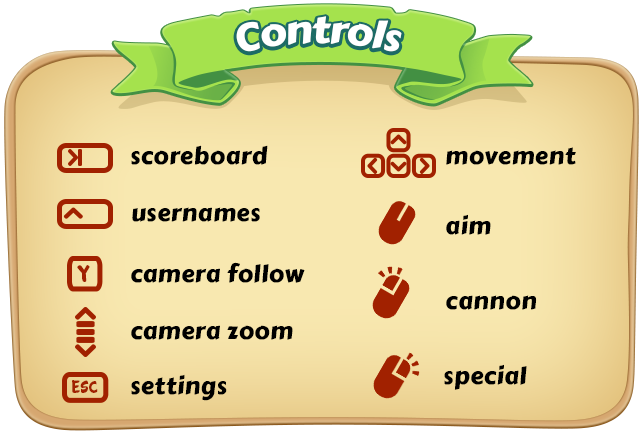
<style>
.page{position:relative;width:643px;height:434px}
.page>*{position:absolute;margin:0}
.t1{font:38px "CarterOne";letter-spacing:-0.02em;color:#ffffff}
.t2{font:24px "CarterOne";letter-spacing:0.02em;color:#000000}
.t3{font:25px "Cartwheel";letter-spacing:0.02em;color:#a12100}
.t4{font:17.9px "Cartwheel";letter-spacing:0.02em;color:#a12100}
</style>
<div class="page">
<p class="t1" style="left:236px;top:16px;width:166px;height:36px">Controls</p>
<p class="t2" style="left:131px;top:145px;width:137px;height:20px">scoreboard</p>
<p class="t2" style="left:446px;top:147px;width:130px;height:18px">movement</p>
<p class="t2" style="left:132px;top:207px;width:128px;height:15px">usernames</p>
<p class="t2" style="left:446px;top:214px;width:45px;height:21px">aim</p>
<p class="t3" style="left:77px;top:265px;width:13px;height:17px">Y</p>
<p class="t2" style="left:131px;top:262px;width:174px;height:21px">camera follow</p>
<p class="t2" style="left:446px;top:295px;width:91px;height:15px">cannon</p>
<p class="t2" style="left:131px;top:325px;width:162px;height:15px">camera zoom</p>
<p class="t2" style="left:444px;top:364px;width:83px;height:26px">special</p>
<p class="t2" style="left:131px;top:374px;width:96px;height:27px">settings</p>
<p class="t4" style="left:72px;top:380px;width:26px;height:13px">esc</p>
</div>
